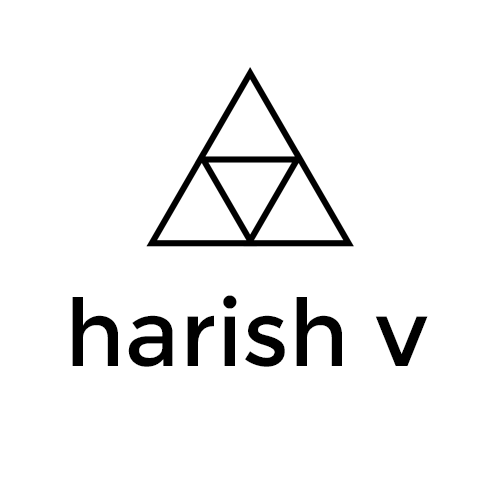
<style>
.page{position:relative;width:500px;height:500px;background:#ffffff}
.page>*{position:absolute;margin:0}
.t1{font:93px "Montserrat-Regular";color:#000000}
</style>
<div class="page">
<p class="t1" style="left:72px;top:295px;width:356px;height:72px">harish v</p>
</div>
